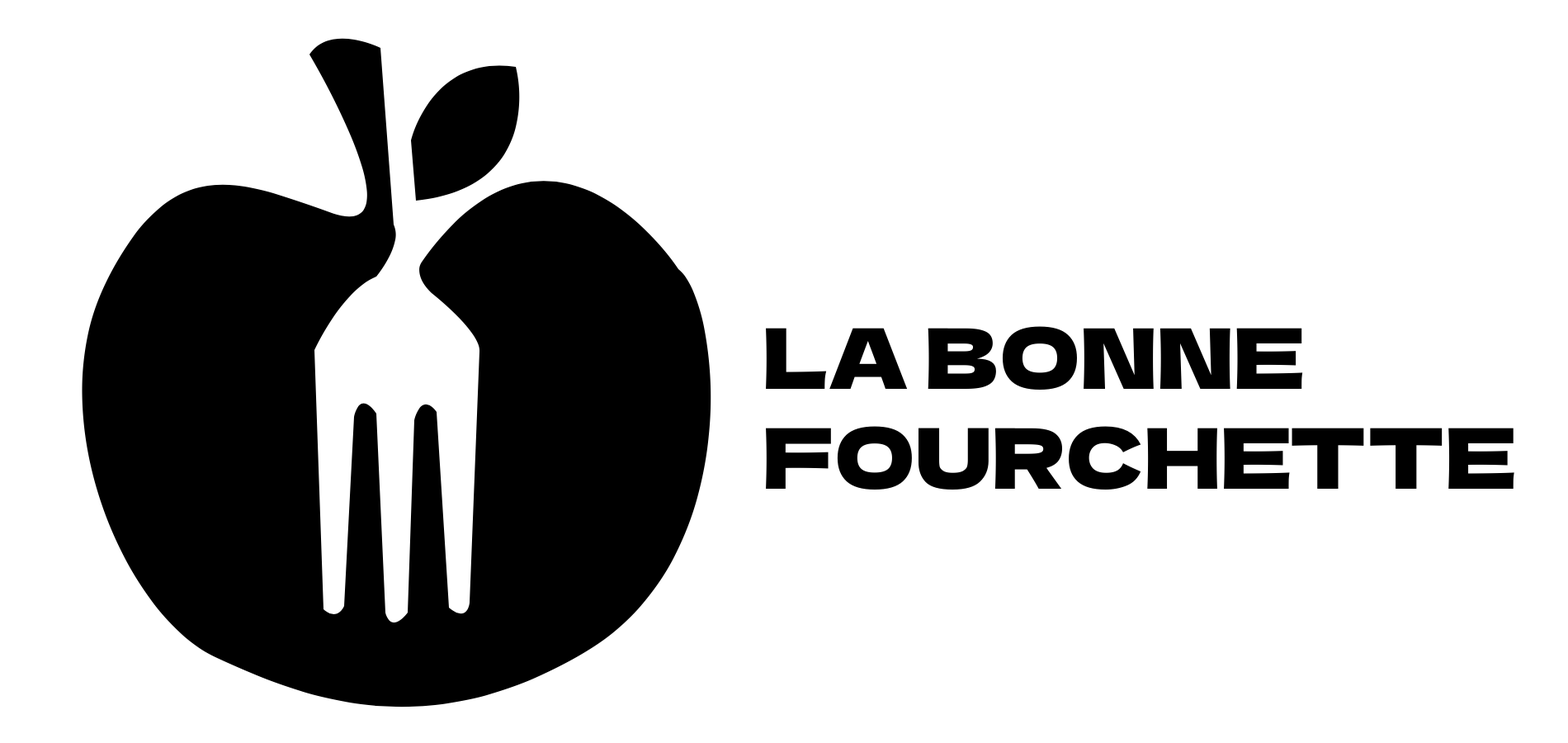
<style>
.page{position:relative;width:1568px;height:743px;background:#ffffff}
.page>*{position:absolute;margin:0}
.t1{font:83.4px "DelaGothicOne-Regular";color:#000000}
</style>
<div class="page">
<p class="t1" style="left:766px;top:326px;width:748px;height:164px">LA BONNE<br>FOURCHETTE</p>
</div>
